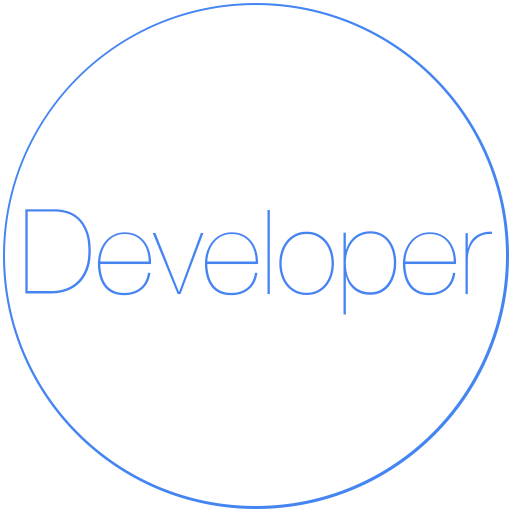
<style>
.page{position:relative;width:512px;height:512px;background:#ffffff}
.page>*{position:absolute;margin:0}
.t1{font:117.7px "HelveticaNeue-UltraLight";color:#4585f2}
</style>
<div class="page">
<p class="t1" style="left:25px;top:209px;width:467px;height:106px">Developer</p>
</div>
